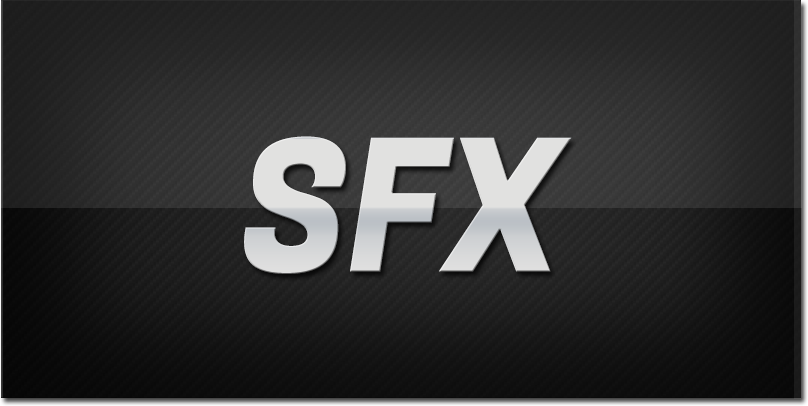
<style>
.page{position:relative;width:808px;height:406px}
.page>*{position:absolute;margin:0}
.t1{font:185.2px "FugazOne-Regular";color:#dfdfdf;scale:0.89 1}
</style>
<div class="page">
<p class="t1" style="left:244px;top:136px;width:328px;height:138px">SFX</p>
</div>
